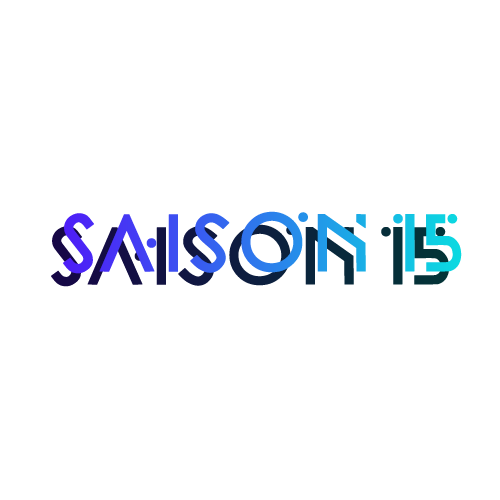
<style>
.page{position:relative;width:500px;height:500px;background:#ffffff}
.page>*{position:absolute;margin:0}
.t1{font:70.8px "FoundationLogo";letter-spacing:-0.25em;font-weight:bold}
</style>
<div class="page">
<p class="t1" style="left:63px;top:211px;width:399px;height:63px">Saison 15</p>
<p class="t1" style="left:51px;top:224px;width:399px;height:63px">Saison 15</p>
</div>
